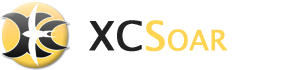
<style>
.page{position:relative;width:300px;height:70px;background:#ffffff}
.page>*{position:absolute;margin:0}
.t1{font:40px "LucidaSansUnicode";color:#ffd452;font-variant:small-caps;font-weight:bold}
.t2{font:40px "LucidaSansUnicode";color:#222222;font-variant:small-caps;font-weight:bold}
</style>
<div class="page">
<p class="t1" style="left:89px;top:20px;width:139px;height:32px"><span class="t2">XC</span>Soar</p>
</div>
